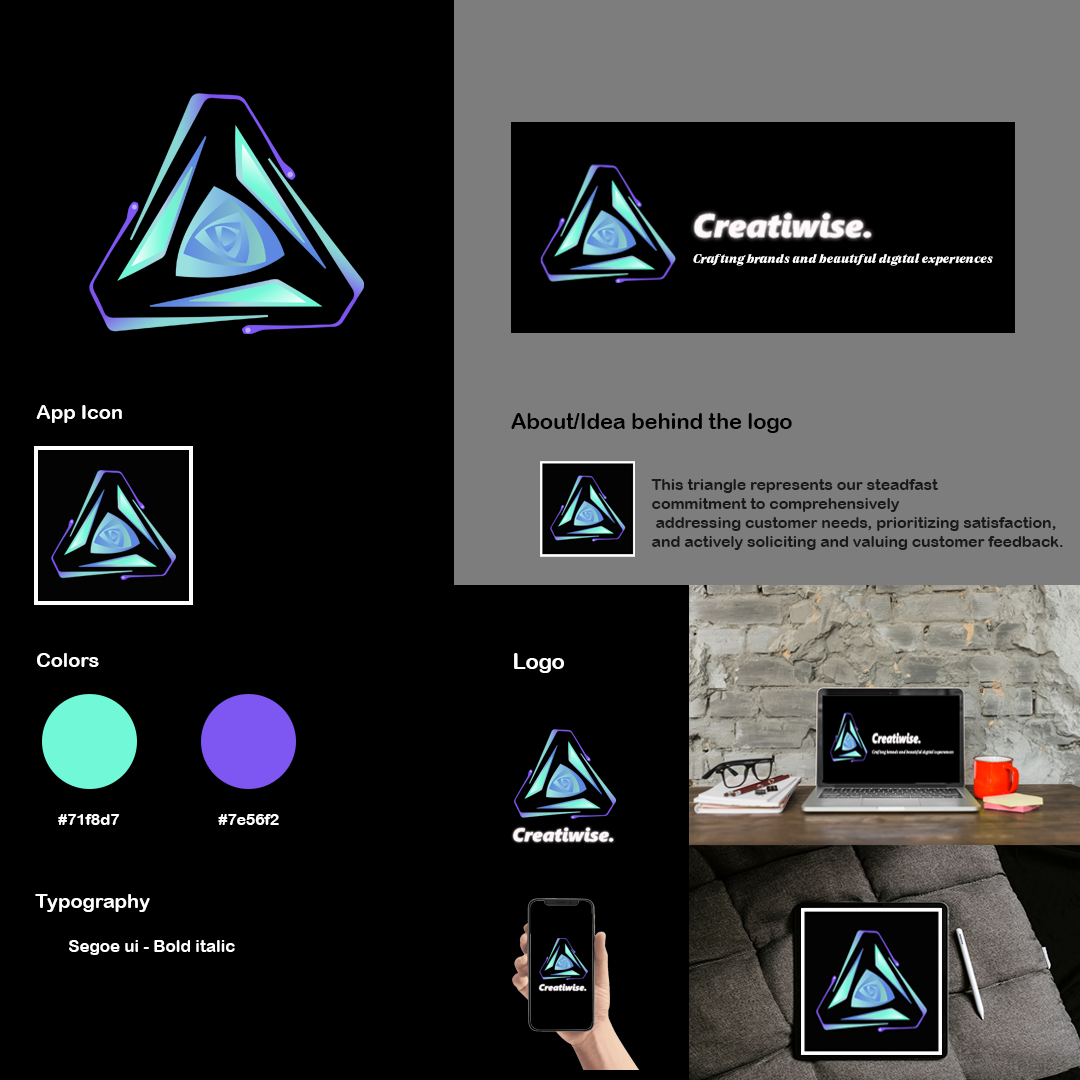
<style>
.page{position:relative;width:1080px;height:1080px;background:#000000}
.page>*{position:absolute;margin:0}
.t1{font:20px "ArialRoundedMTBold";color:#ffffff}
.t2{font:21.6px "ArialRoundedMTBold";color:#000000}
.t3{font:15.7px "ArialRoundedMTBold";color:#1a1a1a}
.t4{font:21.6px "ArialRoundedMTBold";color:#ffffff}
.t5{font:15.7px "ArialRoundedMTBold";color:#ffffff}
.t6{font:17px "ArialRoundedMTBold";color:#ffffff}
</style>
<div class="page">
<p class="t1" style="left:36px;top:405px;width:86px;height:18px">App Icon</p>
<p class="t2" style="left:511px;top:413px;width:281px;height:20px">About/Idea behind the logo</p>
<p class="t3" style="left:651px;top:479px;width:412px;height:71px">This triangle represents our steadfast <br>commitment to comprehensively<br> addressing customer needs, prioritizing satisfaction, <br>and actively soliciting and valuing customer feedback.</p>
<p class="t1" style="left:37px;top:653px;width:62px;height:14px">Colors</p>
<p class="t4" style="left:514px;top:653px;width:50px;height:20px">Logo</p>
<p class="t5" style="left:58px;top:814px;width:62px;height:11px">#71f8d7</p>
<p class="t5" style="left:218px;top:814px;width:61px;height:11px">#7e56f2</p>
<p class="t1" style="left:35px;top:894px;width:115px;height:18px">Typography</p>
<p class="t6" style="left:69px;top:940px;width:166px;height:15px">Segoe ui - Bold italic</p>
</div>
